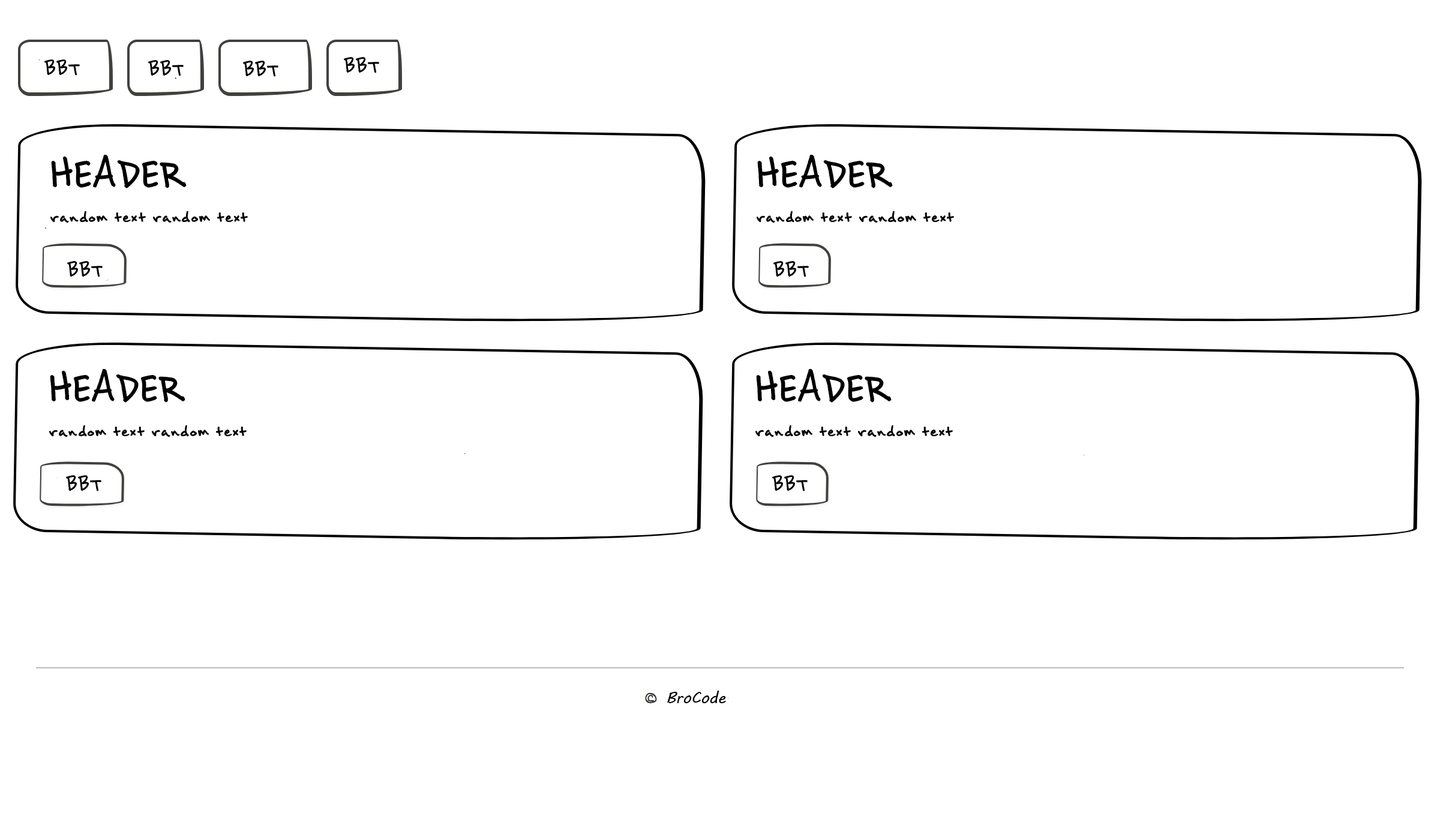
<style>
.page{position:relative;width:1440px;height:828px;background:#ffffff}
.page>*{position:absolute;margin:0}
.t1{font:25.3px "BrownBagLunch";color:#000000}
.t2{font:53.2px "BrownBagLunch";color:#000000}
</style>
<div class="page">
<p class="t1" style="left:148px;top:60px;width:36px;height:16px">BBT</p>
<p class="t1" style="left:243px;top:61px;width:35px;height:16px">BBT</p>
<p class="t1" style="left:344px;top:57px;width:35px;height:16px">BBT</p>
<p class="t2" style="left:51px;top:154px;width:136px;height:34px">HEADER</p>
<p class="t2" style="left:757px;top:154px;width:136px;height:34px">HEADER</p>
<p class="t1" style="left:50px;top:211px;width:198px;height:12px">random text random text</p>
<p class="t1" style="left:757px;top:211px;width:197px;height:12px">random text random text</p>
<p class="t1" style="left:67px;top:261px;width:36px;height:16px">BBT</p>
<p class="t1" style="left:773px;top:261px;width:36px;height:16px">BBT</p>
<p class="t2" style="left:50px;top:368px;width:135px;height:35px">HEADER</p>
<p class="t2" style="left:756px;top:368px;width:136px;height:35px">HEADER</p>
<p class="t1" style="left:49px;top:425px;width:198px;height:12px">random text random text</p>
<p class="t1" style="left:755px;top:425px;width:198px;height:12px">random text random text</p>
<p class="t1" style="left:66px;top:475px;width:35px;height:16px">BBT</p>
<p class="t1" style="left:772px;top:475px;width:36px;height:16px">BBT</p>
</div>
